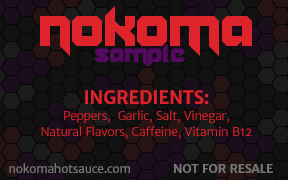
<style>
.page{position:relative;width:288px;height:180px;background:#111111}
.page>*{position:absolute;margin:0}
.t1{font:80px "Vannoidyk";letter-spacing:-0.02em;color:#df232a}
.t2{font:80px "Vannoidyk";letter-spacing:-0.18em;color:#df232a}
.t3{font:36px "Vannoidyk";letter-spacing:-0.02em;color:#560960}
.t4{font:12px/16px "MerriweatherSans-Light";letter-spacing:-0.02em;color:#df232a}
.t5{font:18px/30px "MerriweatherSans-Bold";letter-spacing:-0.02em;color:#df232a}
.t6{font:12px "MerriweatherSans-Regular";letter-spacing:-0.02em;color:#777777}
.t7{font:12px "MerriweatherSans-Bold";letter-spacing:-0.02em;color:#777777}
</style>
<div class="page">
<p class="t1" style="left:40px;top:6px;width:212px;height:50px">noko<span class="t2">n</span>na</p>
<p class="t3" style="left:95px;top:44px;width:90px;height:23px">SaMpLe</p>
<p class="t4" style="left:41px;top:90px;width:211px;height:49px;text-align:center"><span class="t5">INGREDIENTS:<br></span>Peppers,  Garlic, Salt, Vinegar, <br>Natural Flavors, Caffeine, Vitamin B12</p>
<p class="t6" style="left:9px;top:163px;width:121px;height:10px">nokomahotsauce.com</p>
<p class="t7" style="left:174px;top:164px;width:99px;height:9px">NOT FOR RESALE</p>
</div>
